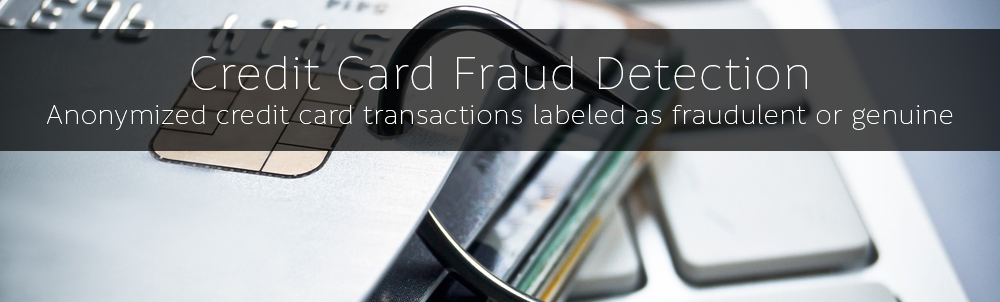
<style>
.page{position:relative;width:1000px;height:302px}
.page>*{position:absolute;margin:0}
.t1{font:29.2px "Informative-Thin";color:#ffffff}
.t2{font:50px "Informative-Thin";color:#ffffff}
</style>
<div class="page">
<p class="t1" style="left:47px;top:56px;width:906px;height:74px;text-align:center"><span class="t2">Credit Card Fraud Detection<br></span>Anonymized credit card transactions labeled as fraudulent or genuine</p>
</div>
